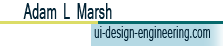
<style>
.page{position:relative;width:223px;height:46px;background:#ffffff}
.page>*{position:absolute;margin:0}
.t1{font:21px "Mangal";letter-spacing:0.025em;color:#022335;scale:0.57 1}
.t2{font:16px "Mangal";letter-spacing:0.025em;color:#022335;scale:0.57 1}
</style>
<div class="page">
<p class="t1" style="left:23px;top:3px;width:89px;height:16px">Adam L Marsh</p>
<p class="t2" style="left:94px;top:26px;width:116px;height:15px">ui-design-engineering.com</p>
</div>
